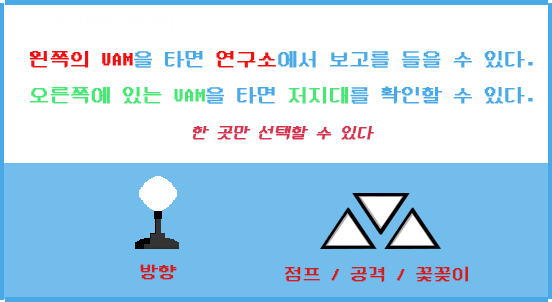
<style>
.page{position:relative;width:552px;height:302px;background:#ffffff}
.page>*{position:absolute;margin:0}
.t1{font:20px/36px "DungGeunMo";color:#49a9e6;font-weight:bold}
.t2{font:20px/36px "DungGeunMo";color:#ef1111;font-weight:bold}
.t3{font:20px/36px "DungGeunMo";color:#49e675;font-weight:bold}
.t4{font:16px/36px "DungGeunMo";color:#d5334e;font-weight:bold;font-style:italic}
.t5{font:18px "DungGeunMo";color:#cd1f1f;font-weight:bold}
</style>
<div class="page">
<p class="t1" style="left:30px;top:51px;width:503px;height:89px;text-align:center"><span class="t2">왼쪽의 UAM</span>을 타면 <span class="t2">연구소</span>에서 보고를 들을 수 있다.<br><span class="t3">오른쪽에 있는 UAM</span>을 타면 <span class="t3">저지대</span>를 확인할 수 있다.<br><span class="t4">한 곳만 선택할 수 있다</span></p>
<p class="t5" style="left:140px;top:264px;width:37px;height:16px">방향</p>
<p class="t5" style="left:285px;top:266px;width:183px;height:16px">점프 / 공격 / 꽃꽂이</p>
</div>
